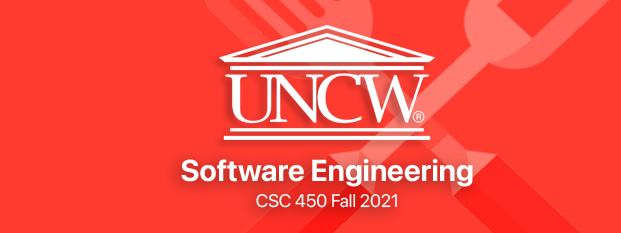
<style>
.page{position:relative;width:621px;height:233px;background:#ff3b30}
.page>*{position:absolute;margin:0}
.t1{font:30px "SFPro-Bold";color:#ffffff}
.t2{font:18px "SFPro-Regular";color:#ffffff}
</style>
<div class="page">
<p class="t1" style="left:181px;top:158px;width:292px;height:29px">Software Engineering</p>
<p class="t2" style="left:256px;top:193px;width:141px;height:15px">CSC 450 Fall 2021</p>
</div>
